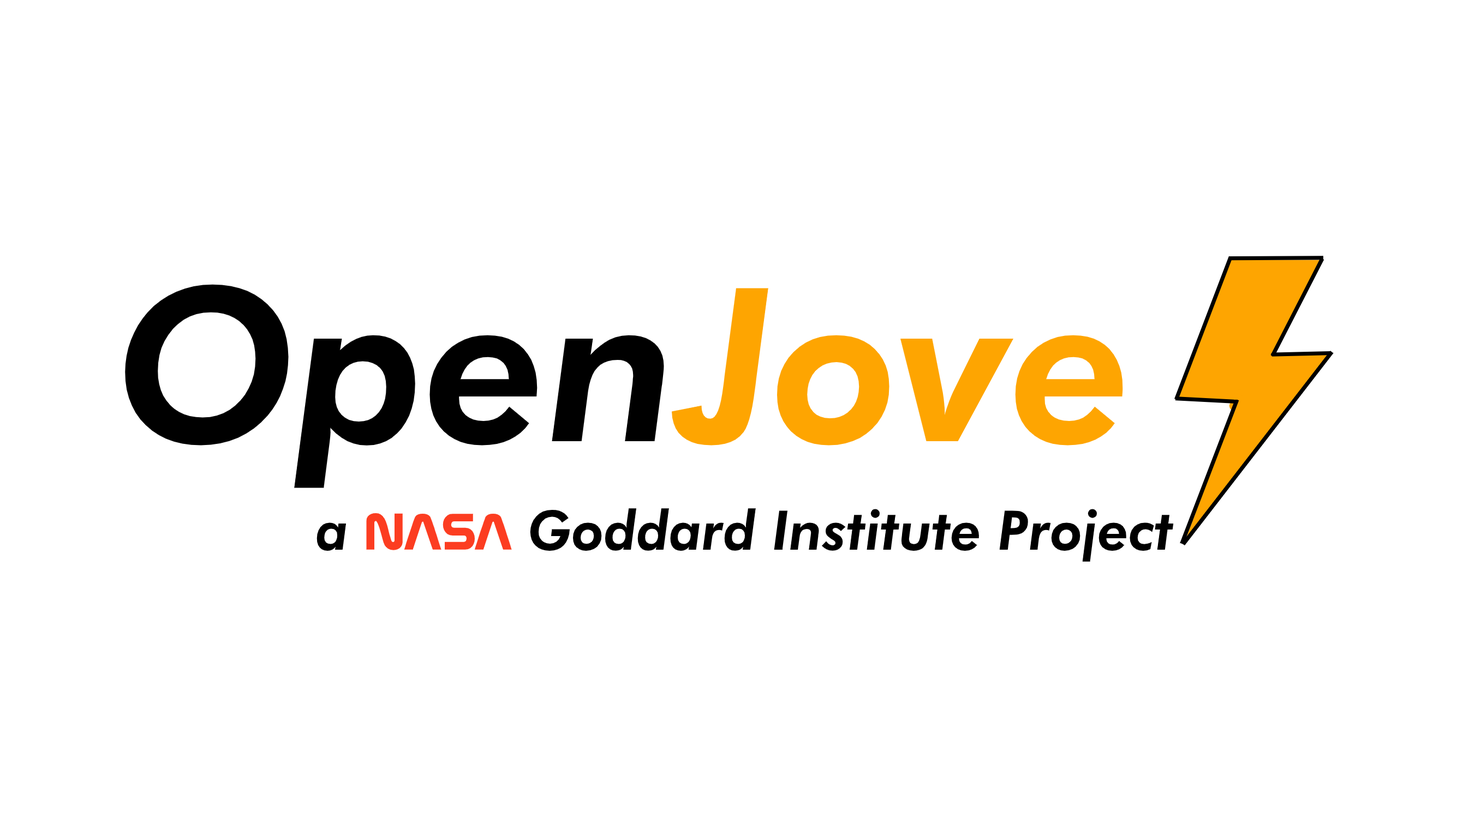
<style>
.page{position:relative;width:1457px;height:818px;background:#ffffff}
.page>*{position:absolute;margin:0}
.t1{font:214.2px "FuturaBT-HeavyItalic";color:#000000}
.t2{font:214.2px "FuturaBT-HeavyItalic";color:#fea501}
.t3{font:54.6px "FuturaBT-HeavyItalic";color:#000000}
.t4{font:60px "Nasa";color:#fc3d21}
</style>
<div class="page">
<p class="t1" style="left:125px;top:284px;width:998px;height:204px">Open<span class="t2">Jove</span></p>
<p class="t3" style="left:316px;top:509px;width:858px;height:53px">a <span class="t4">NASA </span>Goddard Institute Project</p>
</div>
